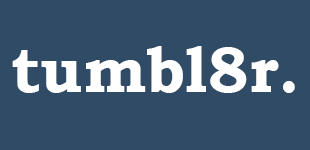
<style>
.page{position:relative;width:310px;height:150px;background:#2f4b66}
.page>*{position:absolute;margin:0}
.t1{font:64px "BookmanOldStyle-Bold";color:#ffffff}
</style>
<div class="page">
<p class="t1" style="left:12px;top:46px;width:283px;height:47px">tumbl8r.</p>
</div>
